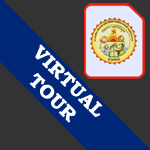
<style>
.page{position:relative;width:150px;height:150px;background:#333333}
.page>*{position:absolute;margin:0}
.t1{font:18.8px "BookmanOldStyle-Bold";color:#ffffff;font-weight:bold}
</style>
<div class="page">
<p class="t1" style="left:29px;top:44px;width:74px;height:79px;text-align:center;rotate:45deg">VIRTUAL<br>TOUR</p>
</div>
